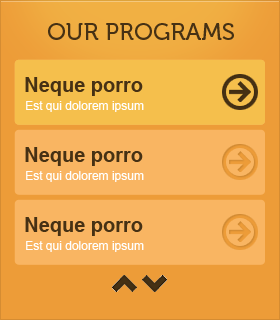
<style>
.page{position:relative;width:280px;height:320px;background:#f9b562}
.page>*{position:absolute;margin:0}
.t1{font:24px "Museo-500";color:#463114;text-transform:uppercase}
.t2{font:20px "Arial-BoldMT";color:#463114}
.t3{font:12px "ArialMT";color:#ffffff}
</style>
<div class="page">
<p class="t1" style="left:48px;top:23px;width:186px;height:17px">Our programs</p>
<p class="t2" style="left:25px;top:77px;width:118px;height:19px">Neque porro</p>
<p class="t2" style="left:25px;top:77px;width:118px;height:19px">Neque porro</p>
<p class="t3" style="left:26px;top:101px;width:118px;height:11px">Est qui dolorem ipsum</p>
<p class="t3" style="left:26px;top:101px;width:118px;height:11px">Est qui dolorem ipsum</p>
<p class="t2" style="left:25px;top:147px;width:118px;height:19px">Neque porro</p>
<p class="t3" style="left:26px;top:171px;width:118px;height:11px">Est qui dolorem ipsum</p>
<p class="t2" style="left:25px;top:217px;width:118px;height:19px">Neque porro</p>
<p class="t3" style="left:26px;top:241px;width:118px;height:11px">Est qui dolorem ipsum</p>
</div>
